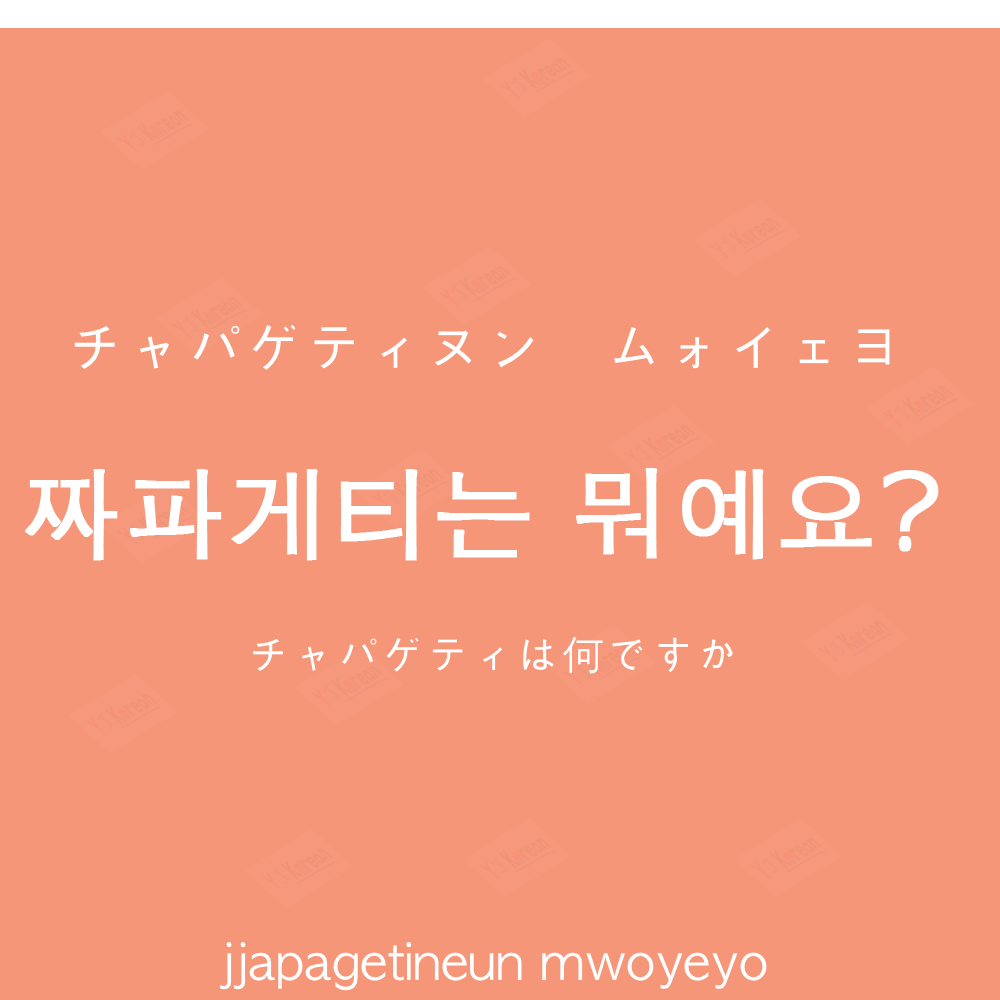
<style>
.page{position:relative;width:1000px;height:1000px;background:#f69679}
.page>*{position:absolute;margin:0}
.t1{font:60px "AppleGothic";color:#ffffff}
.t2{font:100px "AppleGothic";color:#ffffff;font-weight:bold}
.t3{font:45px "AppleGothic";color:#ffffff}
.t4{font:50px "AppleGothic";color:#ffffff}
</style>
<div class="page">
<p class="t1" style="left:74px;top:324px;width:816px;height:46px">チャパゲティヌン　ムォイェヨ</p>
<p class="t2" style="left:25px;top:468px;width:914px;height:93px">짜파게티는 뭐예요?</p>
<p class="t3" style="left:253px;top:636px;width:480px;height:38px">チャパゲティは何ですか</p>
<p class="t4" style="left:220px;top:942px;width:547px;height:49px">jjapagetineun mwoyeyo</p>
</div>
